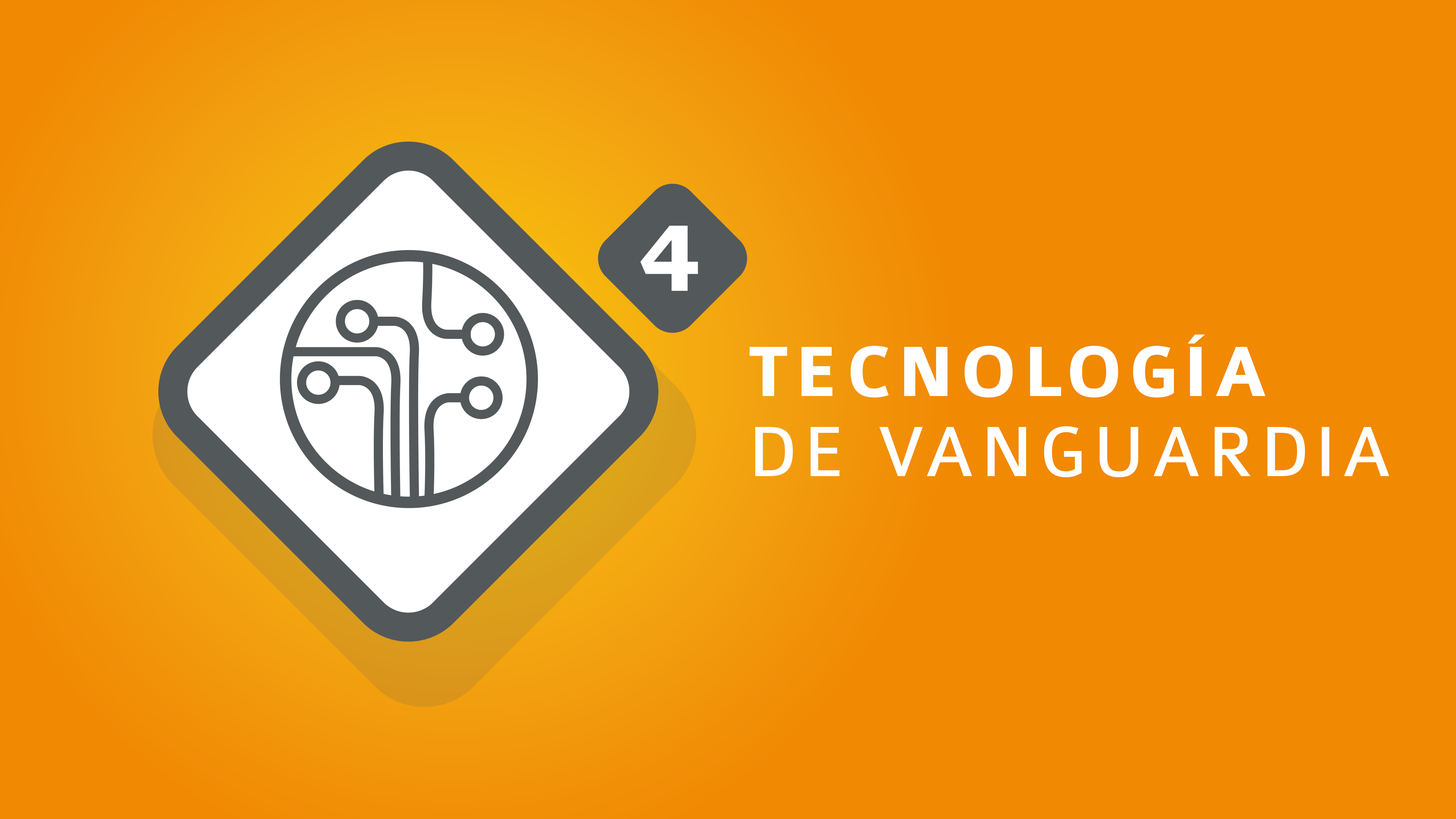
<style>
.page{position:relative;width:1456px;height:819px;background:#f18903}
.page>*{position:absolute;margin:0}
.t1{font:107.1px "Colaborate-Bold";letter-spacing:0.08em;color:#ffffff}
.t2{font:75.8px/79.9px "Colaborate-Regular";letter-spacing:0.08em;color:#ffffff}
.t3{font:75.8px/79.9px "Colaborate-Bold";letter-spacing:0.08em;color:#ffffff}
</style>
<div class="page">
<p class="t1" style="left:640px;top:226px;width:58px;height:65px">4</p>
<p class="t2" style="left:749px;top:335px;width:640px;height:142px"><span class="t3">TECNOLOGÍA<br></span>DE VANGUARDIA</p>
</div>
